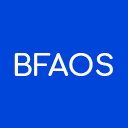
<style>
.page{position:relative;width:128px;height:128px;background:#0045da}
.page>*{position:absolute;margin:0}
.t1{font:29.2px "Comfortaa-Bold";color:#ffffff}
</style>
<div class="page">
<p class="t1" style="left:14px;top:53px;width:99px;height:23px">BFAOS</p>
</div>
